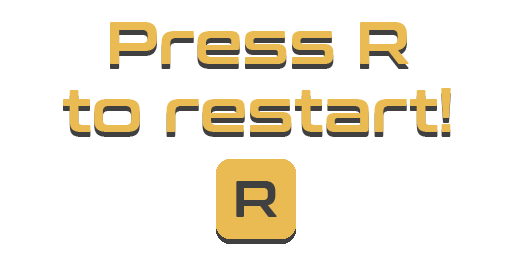
<style>
.page{position:relative;width:512px;height:256px;background:#ffffff}
.page>*{position:absolute;margin:0}
.t1{font:60px/100px "ConthraxSb-Regular";color:#e9bb52}
.t2{font:50px "ConthraxSb-Regular";color:#404040}
</style>
<div class="page">
<p class="t1" style="left:63px;top:22px;width:388px;height:110px;text-align:center">Press R<br>to restart!</p>
<p class="t2" style="left:236px;top:181px;width:41px;height:36px">R</p>
</div>
